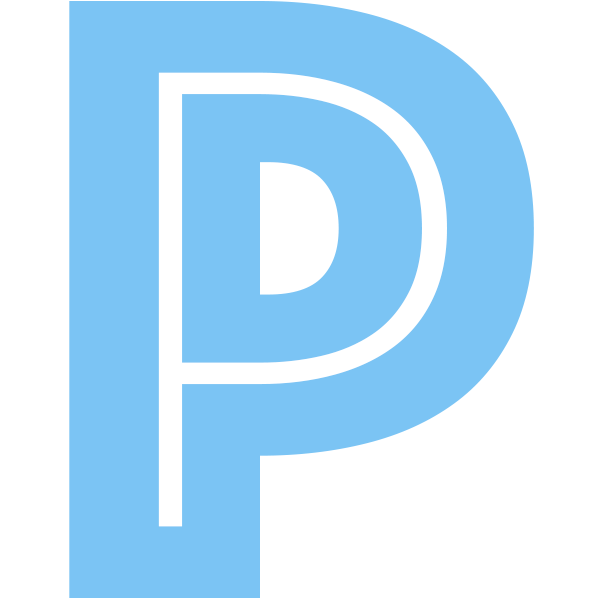
<style>
.page{position:relative;width:600px;height:600px;background:#7bc4f4}
.page>*{position:absolute;margin:0}
.t1{font:895px "Phosphate-Inline";color:#7bc4f4}
</style>
<div class="page">
<p class="t1" style="left:69px;top:1px;width:465px;height:597px">P</p>
</div>
